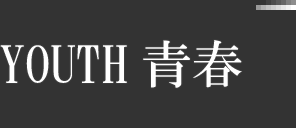
<style>
.page{position:relative;width:296px;height:128px;background:#333333}
.page>*{position:absolute;margin:0}
.t1{font:51px "HGMinchoB";color:#ffffff;text-transform:uppercase}
</style>
<div class="page">
<p class="t1" style="left:143px;top:40px;width:99px;height:48px">青春</p>
<p class="t1" style="left:0px;top:45px;width:127px;height:38px">Youth</p>
</div>
